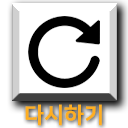
<style>
.page{position:relative;width:128px;height:128px;background:#ffffff}
.page>*{position:absolute;margin:0}
.t1{font:22px "NanumSquareEB";color:#ffae21}
</style>
<div class="page">
<p class="t1" style="left:25px;top:104px;width:77px;height:22px">다시하기</p>
</div>
